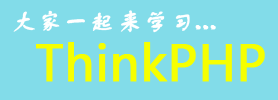
<style>
.page{position:relative;width:278px;height:100px;background:#82dce9}
.page>*{position:absolute;margin:0}
.t1{font:24px "FZSTK--GBK1-0";color:#ffffff;font-weight:bold;scale:1.07 1}
.t2{font:23.2px "Algerian";color:#ffffff;font-weight:bold;scale:1.07 1}
.t3{font:48px "MicrosoftYaHei";color:#f6ff00;font-weight:bold}
</style>
<div class="page">
<p class="t1" style="left:13px;top:10px;width:203px;height:23px">大家一起来学习<span class="t2">...</span></p>
<p class="t3" style="left:36px;top:42px;width:229px;height:40px">ThinkPHP</p>
</div>
